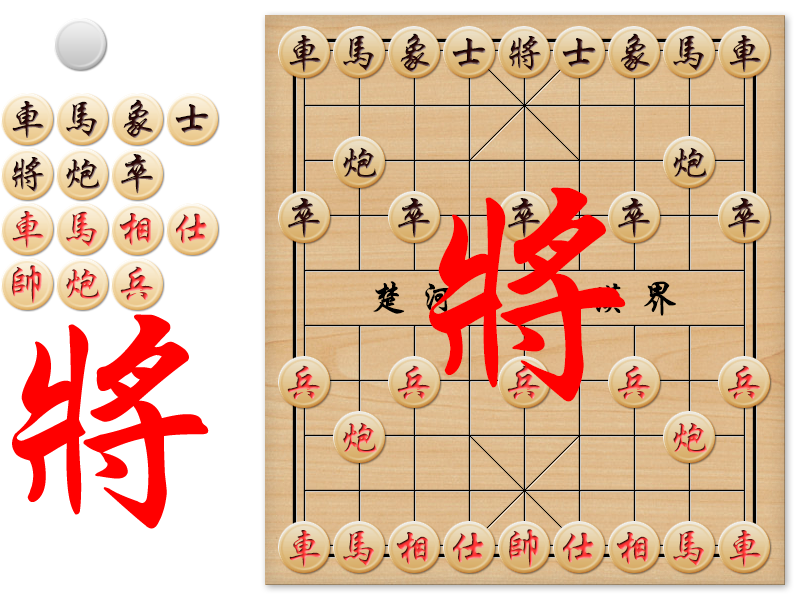
<style>
.page{position:relative;width:800px;height:600px;background:#ffffff}
.page>*{position:absolute;margin:0}
.t1{font:40px/55px "FZXKFW--GB1-0";letter-spacing:0.35em;font-weight:bold}
.t2{font:250px "FZXKFW--GB1-0";color:#ff0000;font-weight:bold}
.t3{font:36px "FZXKFW--GB1-0";letter-spacing:0.35em;color:#000000;font-weight:bold}
</style>
<div class="page">
<p class="t1" style="left:288px;top:33px;width:473px;height:205px">车马象士将士象马车<br><br>　炮　　　　　炮<br>卒　卒　卒　卒　卒</p>
<p class="t1" style="left:12px;top:99px;width:197px;height:95px">车马象士<br>将炮卒</p>
<p class="t2" style="left:429px;top:187px;width:197px;height:215px">将</p>
<p class="t1" style="left:12px;top:211px;width:195px;height:93px">车马相仕<br>帅炮兵</p>
<p class="t3" style="left:373px;top:281px;width:303px;height:35px">楚河     汉界</p>
<p class="t2" style="left:12px;top:314px;width:197px;height:215px">将</p>
<p class="t1" style="left:287px;top:365px;width:474px;height:203px">兵　兵　兵　兵　兵<br>　炮　　　　　炮<br><br>车马相仕帅仕相马车</p>
</div>
